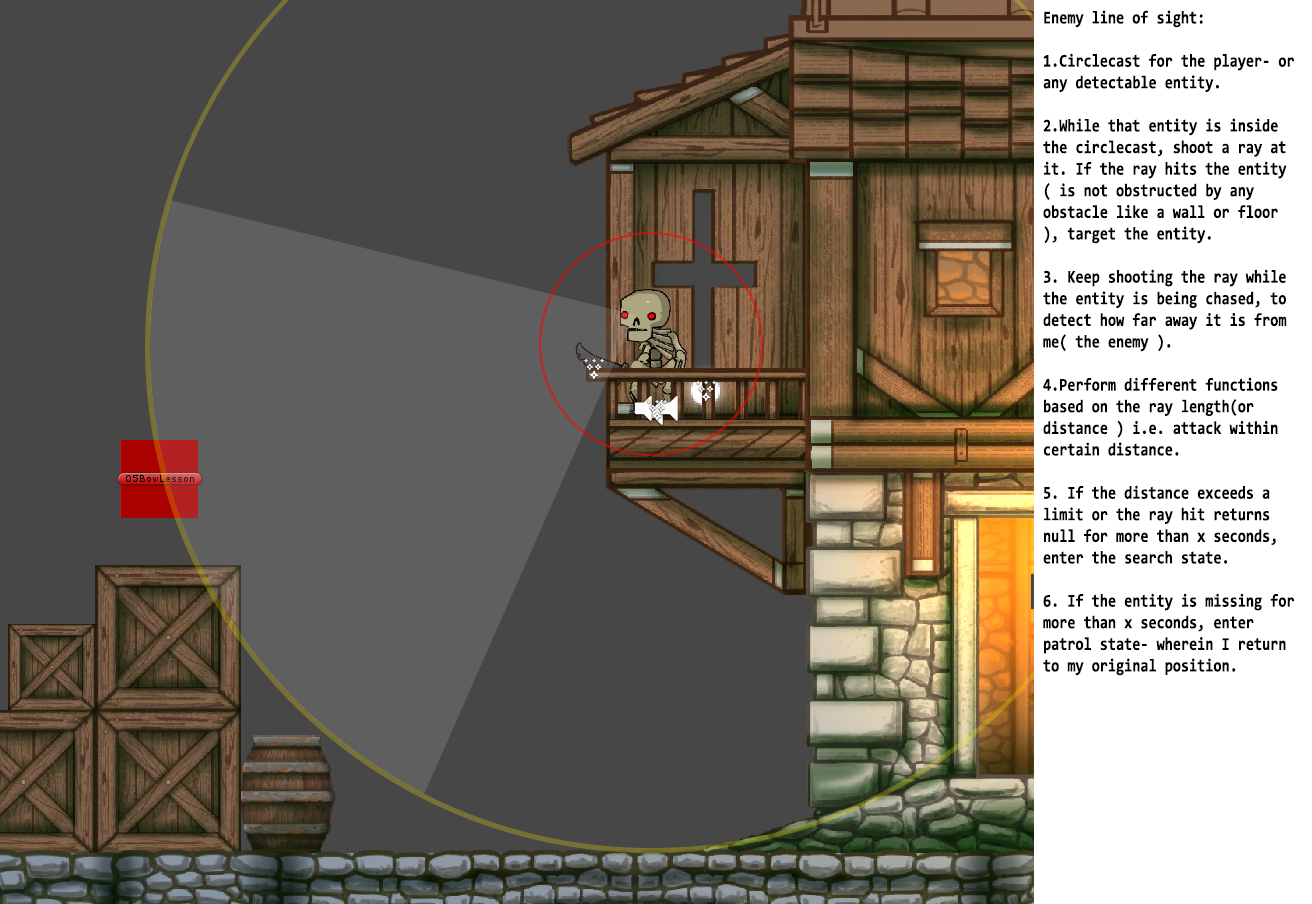
<style>
.page{position:relative;width:1312px;height:904px;background:#474747}
.page>*{position:absolute;margin:0}
.t1{font:18px "Consolas-Bold";color:#000000;scale:0.82 1}
</style>
<div class="page">
<p class="t1" style="left:1043px;top:10px;width:251px;height:666px">Enemy line of sight:<br><br>1.Circlecast for the player- or any detectable entity.<br><br>2.While that entity is inside the circlecast, shoot a ray at it. If the ray hits the entity ( is not obstructed by any obstacle like a wall or floor ), target the entity.<br><br>3. Keep shooting the ray while the entity is being chased, to detect how far away it is from me( the enemy ).<br><br>4.Perform different functions based on the ray length(or distance ) i.e. attack within certain distance.<br><br>5. If the distance exceeds a limit or the ray hit returns null for more than x seconds, enter the search state.<br><br>6. If the entity is missing for more than x seconds, enter patrol state- wherein I return to my original position.</p>
</div>
